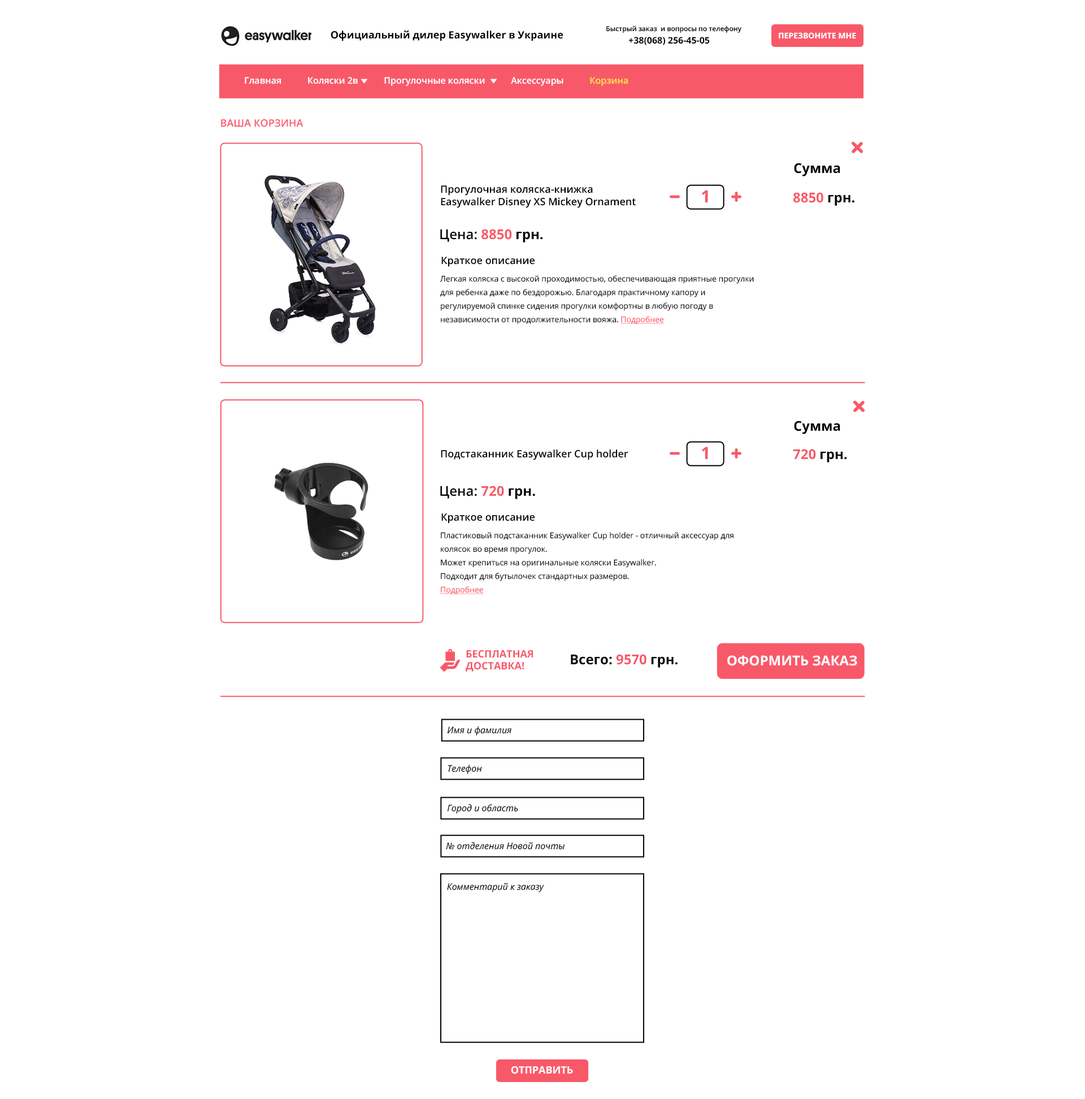
<style>
.page{position:relative;width:1085px;height:1099px;background:#ffffff}
.page>*{position:absolute;margin:0}
.t1{font:6.8px "OpenSans-Semibold";color:#000000}
.t2{font:10.2px "OpenSans-Bold";color:#000000}
.t3{font:9px "OpenSans-Bold";color:#000000}
.t4{font:7.9px "OpenSans-Bold";color:#ffffff;text-transform:uppercase}
.t5{font:9px "OpenSans-Semibold";color:#ffffff}
.t6{font:9px "OpenSans-Semibold";color:#ffe444}
.t7{font:10.2px "OpenSans-Semibold";color:#f85969;text-transform:uppercase}
.t8{font:13.6px "OpenSans-Bold";color:#000000}
.t9{font:10.2px "OpenSans-Semibold";color:#000000}
.t10{font:17px "OpenSans-Bold";color:#f85969;text-transform:uppercase}
.t11{font:13.6px "OpenSans-Bold";color:#f85969}
.t12{font:13.6px "OpenSans-Semibold";color:#000000}
.t13{font:7.9px/13.6px "OpenSans";color:#000000}
.t14{font:7.9px/13.6px "OpenSans";color:#000000;text-decoration:underline}
.t15{font:7.9px/13.6px "OpenSans";color:#f85969;text-decoration:underline}
.t16{font:10.2px "OpenSans-Bold";color:#f85969;text-transform:uppercase}
.t17{font:13.6px "OpenSans-Bold";color:#ffffff;text-transform:uppercase}
.t18{font:9px "OpenSans-Italic";color:#000000}
.t19{font:10.2px "OpenSans-Bold";color:#ffffff;text-transform:uppercase}
</style>
<div class="page">
<p class="t1" style="left:606px;top:25px;width:136px;height:8px">Быстрый заказ  и вопросы по телефону</p>
<p class="t2" style="left:331px;top:31px;width:232px;height:10px">Официальный дилер Easywalker в Украине</p>
<p class="t3" style="left:629px;top:37px;width:81px;height:8px">+38(068) 256-45-05</p>
<p class="t4" style="left:779px;top:32px;width:77px;height:7px">Перезвоните мне</p>
<p class="t5" style="left:245px;top:77px;width:383px;height:9px">Главная           Коляски 2в           Прогулочные коляски           Аксессуары           <span class="t6">Корзина</span></p>
<p class="t7" style="left:221px;top:119px;width:83px;height:8px">Ваша корзина</p>
<p class="t8" style="left:794px;top:163px;width:46px;height:13px">Сумма</p>
<p class="t9" style="left:441px;top:185px;width:195px;height:23px">Прогулочная коляска-книжка <br>Easywalker Disney XS Mickey Ornament</p>
<p class="t10" style="left:701px;top:190px;width:7px;height:12px">1</p>
<p class="t11" style="left:793px;top:192px;width:62px;height:14px">8850 <span class="t8">грн.</span></p>
<p class="t12" style="left:440px;top:229px;width:103px;height:13px">Цена: <span class="t11">8850</span><span class="t8"> грн.</span></p>
<p class="t9" style="left:441px;top:257px;width:94px;height:10px">Краткое описание</p>
<p class="t13" style="left:440px;top:275px;width:314px;height:49px">Легкая коляска с высокой проходимостью, обеспечивающая приятные прогулки для ребенка даже по бездорожью. Благодаря практичному капору и регулируемой спинке сидения прогулки комфортны в любую погоду в независимости от продолжительности вояжа. <span class="t14">Подробнее</span></p>
<p class="t8" style="left:794px;top:421px;width:46px;height:13px">Сумма</p>
<p class="t9" style="left:441px;top:449px;width:188px;height:11px">Подстаканник Easywalker Cup holder</p>
<p class="t10" style="left:701px;top:447px;width:7px;height:12px">1</p>
<p class="t8" style="left:793px;top:449px;width:54px;height:13px"><span class="t11">720 </span>грн.</p>
<p class="t12" style="left:440px;top:486px;width:95px;height:13px">Цена: <span class="t11">720 </span><span class="t8">грн.</span></p>
<p class="t9" style="left:441px;top:513px;width:94px;height:10px">Краткое описание</p>
<p class="t13" style="left:440px;top:532px;width:294px;height:63px">Пластиковый подстаканник Easywalker Cup holder - отличный аксессуар для колясок во время прогулок. <br>Может крепиться на оригинальные коляски Easywalker. <br>Подходит для бутылочек стандартных размеров. <br><span class="t15">Подробнее</span></p>
<p class="t16" style="left:466px;top:650px;width:67px;height:21px">Бесплатная<br>доставка!</p>
<p class="t8" style="left:571px;top:654px;width:107px;height:14px">Всего: <span class="t11">9570 </span>грн.</p>
<p class="t17" style="left:727px;top:655px;width:130px;height:11px">Оформить заказ</p>
<p class="t18" style="left:447px;top:726px;width:65px;height:9px">Имя и фамилия</p>
<p class="t18" style="left:448px;top:764px;width:34px;height:10px">Телефон</p>
<p class="t18" style="left:447px;top:804px;width:71px;height:9px">Город и область</p>
<p class="t18" style="left:446px;top:842px;width:119px;height:8px">№ отделения Новой почты</p>
<p class="t18" style="left:447px;top:882px;width:97px;height:10px">Комментарий к заказу</p>
<p class="t19" style="left:511px;top:1066px;width:62px;height:8px">ОТправить</p>
</div>
